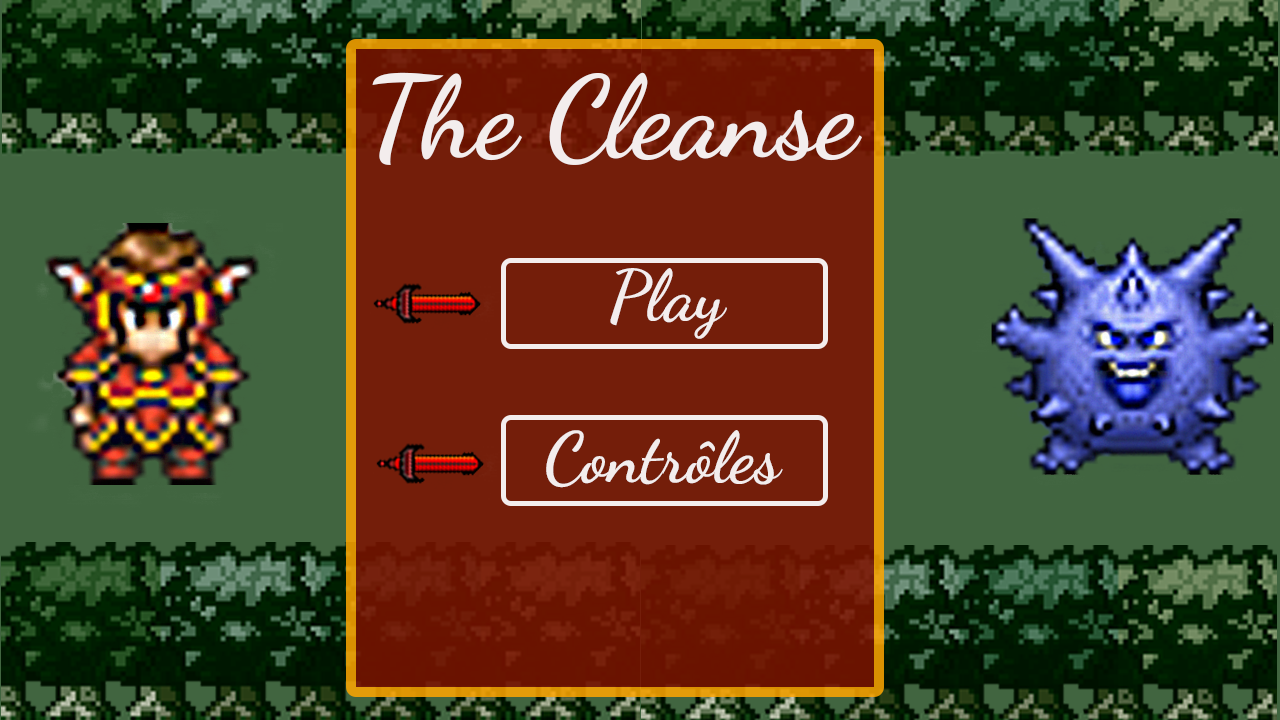
<style>
.page{position:relative;width:1280px;height:720px;background:#416540}
.page>*{position:absolute;margin:0}
.t1{font:114px "DancingScript-Bold";color:#f3eded}
.t2{font:70.7px "DancingScript-Bold";color:#f3eded}
</style>
<div class="page">
<p class="t1" style="left:372px;top:72px;width:490px;height:93px">The Cleanse</p>
<p class="t2" style="left:610px;top:268px;width:117px;height:71px">Play</p>
<p class="t2" style="left:546px;top:430px;width:237px;height:58px">Contrôles</p>
</div>
